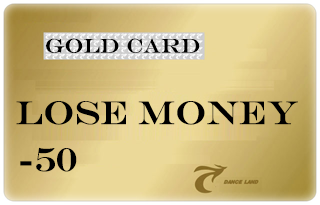
<style>
.page{position:relative;width:320px;height:205px}
.page>*{position:absolute;margin:0}
.t1{font:20px "EngraversMT";color:#000000}
.t2{font:33px "EngraversMT";color:#000000}
</style>
<div class="page">
<p class="t1" style="left:46px;top:38px;width:154px;height:15px">Gold Card</p>
<p class="t2" style="left:16px;top:101px;width:282px;height:24px">lose money</p>
<p class="t2" style="left:20px;top:147px;width:57px;height:25px">-50</p>
</div>
